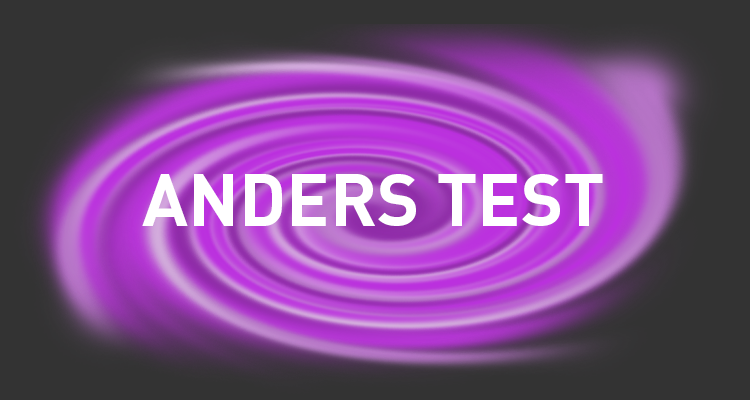
<style>
.page{position:relative;width:750px;height:400px;background:#333333}
.page>*{position:absolute;margin:0}
.t1{font:72px "DINPro-Bold";color:#ffffff}
</style>
<div class="page">
<p class="t1" style="left:142px;top:174px;width:461px;height:52px">ANDERS TEST</p>
</div>
